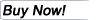
<style>
.page{position:relative;width:100px;height:20px;background:#ffffff}
.page>*{position:absolute;margin:0}
.t1{font:14px "ArialMT";color:#000000;font-weight:bold;font-style:italic}
</style>
<div class="page">
<p class="t1" style="left:3px;top:5px;width:63px;height:14px">Buy Now!</p>
</div>
